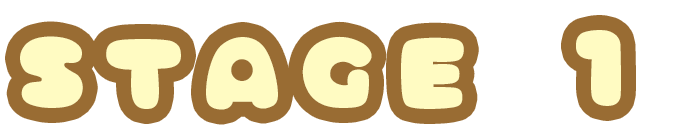
<style>
.page{position:relative;width:673px;height:136px;background:#ffffff}
.page>*{position:absolute;margin:0}
.t1{font:100px "AmeChanPopMaruLight-Regular";letter-spacing:0.2em;color:#fffbc2}
</style>
<div class="page">
<p class="t1" style="left:20px;top:30px;width:601px;height:80px">STAGE 1</p>
</div>
